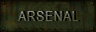
<style>
.page{position:relative;width:96px;height:32px}
.page>*{position:absolute;margin:0}
.t1{font:14px "ArialNarrow";letter-spacing:0.04em;text-transform:uppercase;scale:1.06 1}
</style>
<div class="page">
<p class="t1" style="left:18px;top:11px;width:61px;height:10px">arsenal</p>
</div>
